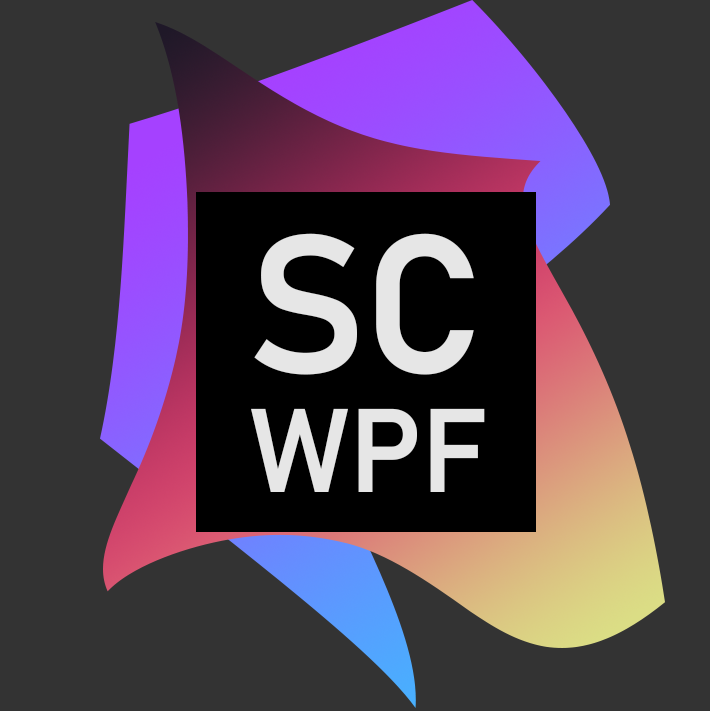
<style>
.page{position:relative;width:710px;height:711px;background:#333333}
.page>*{position:absolute;margin:0}
.t1{font:194.4px "Bahnschrift-SemiBold";color:#e6e6e6}
.t2{font:116.7px "Bahnschrift-SemiBold";color:#e6e6e6}
</style>
<div class="page">
<p class="t1" style="left:254px;top:233px;width:220px;height:142px">SC</p>
<p class="t2" style="left:251px;top:408px;width:234px;height:84px">WPF</p>
</div>
